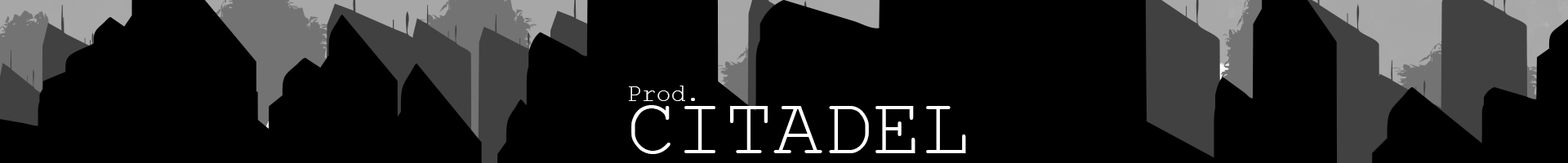
<style>
.page{position:relative;width:1568px;height:163px;background:#000000}
.page>*{position:absolute;margin:0}
.t1{font:24.5px "CourierNewPSMT";color:#ffffff}
.t2{font:81.7px "CourierNewPSMT";color:#ffffff}
</style>
<div class="page">
<p class="t1" style="left:629px;top:86px;width:66px;height:15px">Prod.</p>
<p class="t2" style="left:631px;top:105px;width:335px;height:49px">CITADEL</p>
</div>
